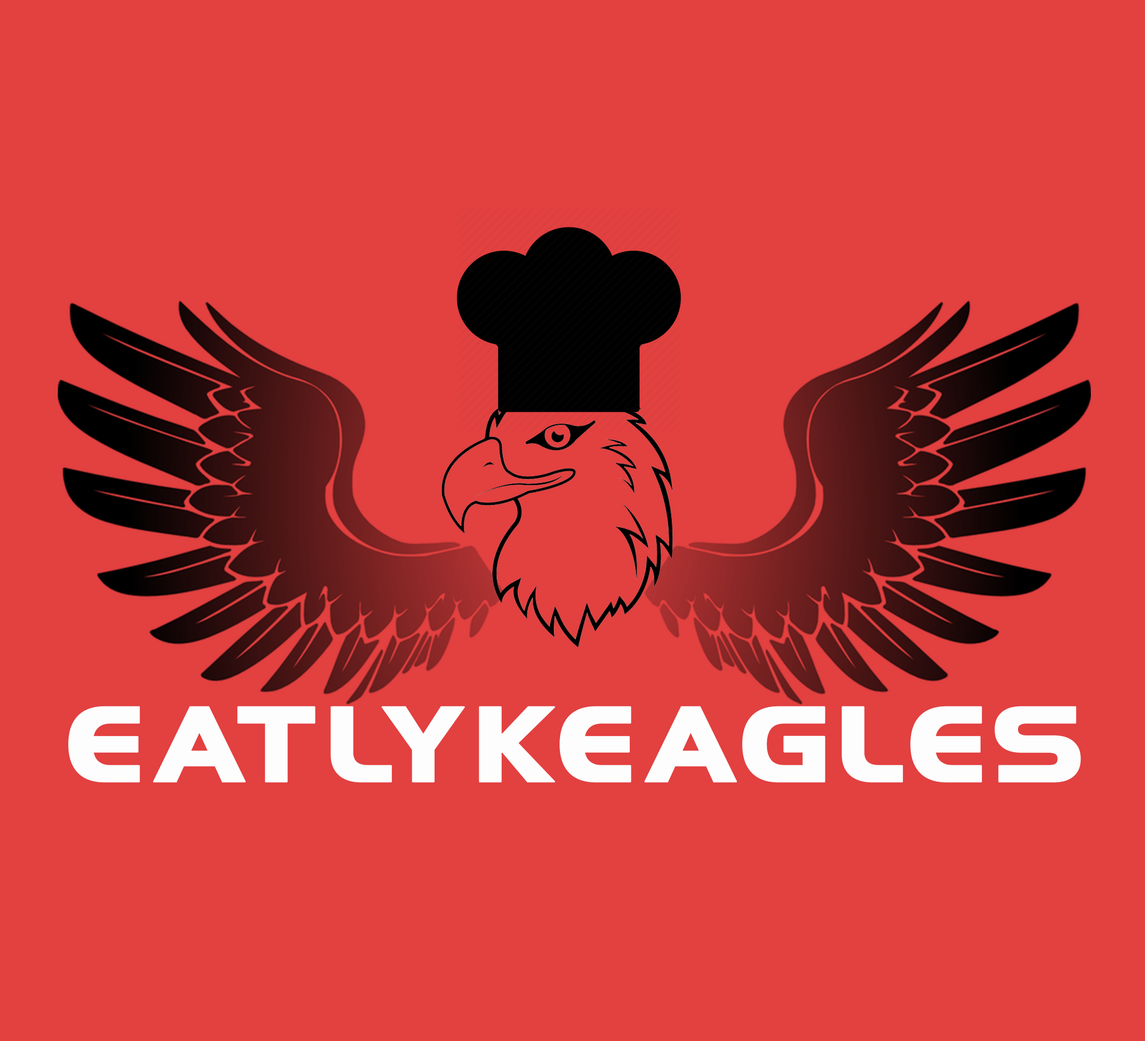
<style>
.page{position:relative;width:1145px;height:1041px;background:#e34040}
.page>*{position:absolute;margin:0}
.t1{font:96.4px "HighlandGothicFLF-Bold";letter-spacing:0.06em;color:#fdfdfd;font-weight:bold;scale:1.16 1}
</style>
<div class="page">
<p class="t1" style="left:68px;top:706px;width:1013px;height:77px">EATLYKEAGLES</p>
</div>
